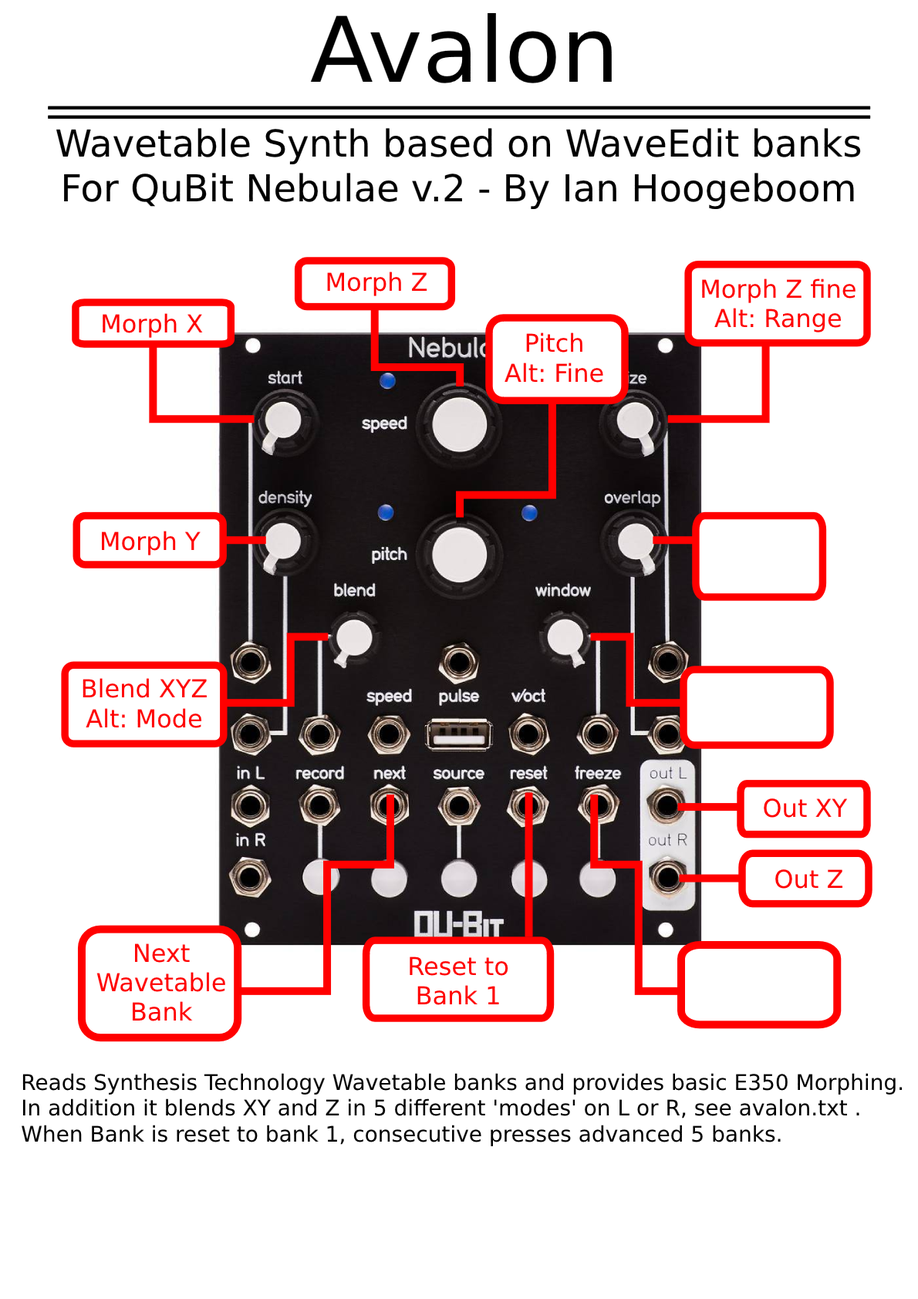
<style>
.page{position:relative;width:918px;height:1299px;background:#ffffff}
.page>*{position:absolute;margin:0}
.t1{font:90.3px "Helvetica";color:#000000}
.t2{font:37.2px "Helvetica";color:#000000}
.t3{font:37.2px "Helvetica";letter-spacing:-0.003em;color:#000000}
.t4{font:24.7px "Helvetica";color:#ff0000}
.t5{font:21.6px "Helvetica";color:#000000}
</style>
<div class="page">
<p class="t1" style="left:310px;top:13px;width:302px;height:70px">Avalon</p>
<p class="t2" style="left:56px;top:128px;width:805px;height:82px;text-align:center">Wavetable Synth based on WaveEdit banks<br>For Q<span class="t3">u</span>Bit N<span class="t3">e</span>bulae v.2 - By Ian Hoogeboom</p>
<p class="t4" style="left:327px;top:272px;width:100px;height:24px">Morph Z</p>
<p class="t4" style="left:702px;top:278px;width:153px;height:54px;text-align:center">Morph Z fine<br>Alt: Range</p>
<p class="t4" style="left:103px;top:313px;width:100px;height:25px">Morph X</p>
<p class="t4" style="left:504px;top:332px;width:99px;height:51px;text-align:center">Pitch<br>Alt: Fine</p>
<p class="t4" style="left:102px;top:531px;width:99px;height:24px">Morph Y</p>
<p class="t4" style="left:83px;top:678px;width:124px;height:50px;text-align:center">Blend XYZ<br>Alt: Mode</p>
<p class="t4" style="left:764px;top:798px;width:84px;height:20px">Out XY</p>
<p class="t4" style="left:775px;top:869px;width:67px;height:20px">Out Z</p>
<p class="t4" style="left:96px;top:943px;width:129px;height:78px;text-align:center">Next<br>Wavetable<br>Bank</p>
<p class="t4" style="left:410px;top:957px;width:98px;height:48px;text-align:center">Reset to<br>Bank 1</p>
<p class="t5" style="left:22px;top:1073px;width:881px;height:73px">Reads Synthesis Technology Wavetable banks and provides basic E350 Morphing.<br>In addition it blends XY and Z in 5 different 'modes' on L or R, see avalon.txt .<br>When Bank is reset to bank 1, consecutive presses advanced 5 banks.</p>
</div>
